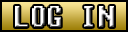
<style>
.page{position:relative;width:128px;height:32px;background:#000000}
.page>*{position:absolute;margin:0}
.t1{font:30px "Fixedsys";scale:0.9 1}
</style>
<div class="page">
<p class="t1" style="left:15px;top:6px;width:99px;height:21px">LOG IN</p>
</div>
